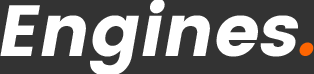
<style>
.page{position:relative;width:314px;height:74px;background:#333333}
.page>*{position:absolute;margin:0}
.t1{font:72px "Poppins";color:#ffffff;font-style:italic}
.t2{font:72px "Poppins";color:#fd6502;font-style:italic}
</style>
<div class="page">
<p class="t1" style="left:0px;top:0px;width:314px;height:76px">Engines<span class="t2">.</span></p>
</div>
